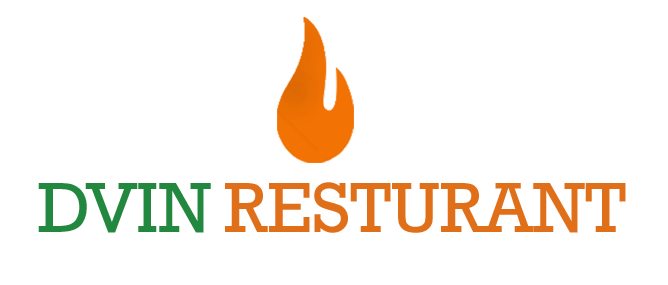
<style>
.page{position:relative;width:668px;height:285px;background:#ffffff}
.page>*{position:absolute;margin:0}
.t1{font:72px "Rockwell";color:#23883f;text-transform:uppercase}
.t2{font:72px "Rockwell";color:#e06f1a;text-transform:uppercase}
</style>
<div class="page">
<p class="t1" style="left:38px;top:183px;width:173px;height:50px">dvin</p>
<p class="t2" style="left:225px;top:182px;width:401px;height:51px">resturant</p>
</div>
